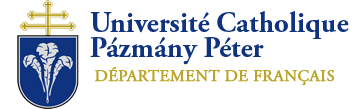
<style>
.page{position:relative;width:357px;height:109px;background:#ffffff}
.page>*{position:absolute;margin:0}
.t1{font:28.9px/25px "AGaramondPro-Bold";color:#103380}
.t2{font:16.5px "AGaramondPro-Regular";color:#bba52a;font-weight:bold}
</style>
<div class="page">
<p class="t1" style="left:90px;top:11px;width:259px;height:54px">Université Catholique <br>Pázmány Péter</p>
<p class="t2" style="left:95px;top:66px;width:239px;height:20px">DÉPARTEMENT DE FRANÇAIS</p>
</div>
